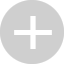
<style>
.page{position:relative;width:64px;height:64px;background:#cfcfcf}
.page>*{position:absolute;margin:0}
.t1{font:60px "Geneva";letter-spacing:-0.2em;color:#ffffff;scale:1.15 1}
</style>
<div class="page">
<p class="t1" style="left:14px;top:16px;width:38px;height:33px">+</p>
</div>
